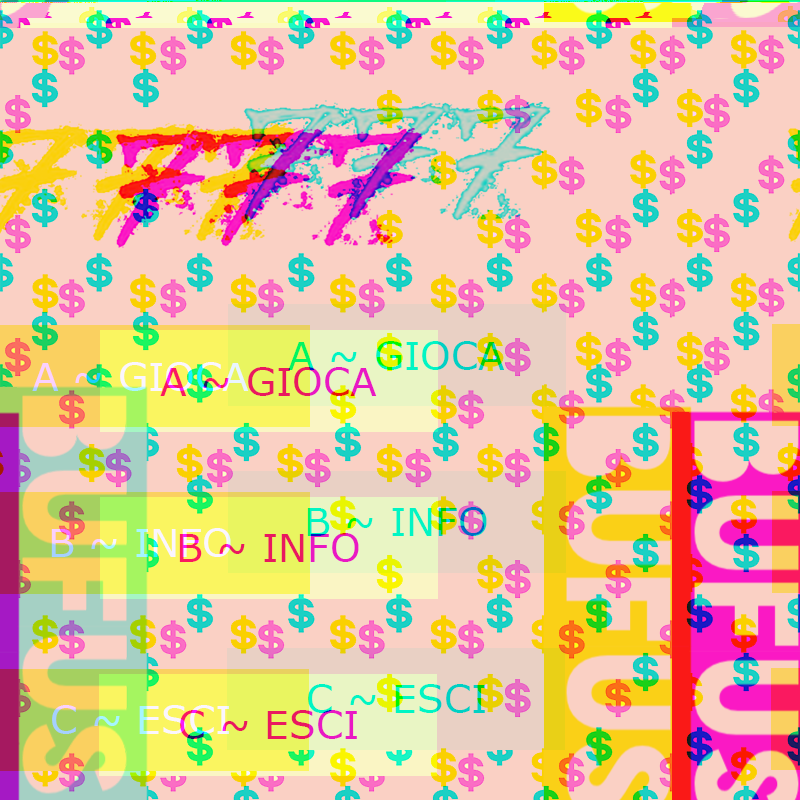
<style>
.page{position:relative;width:800px;height:800px;background:#fad0c4}
.page>*{position:absolute;margin:0}
.t1{font:38.9px "Verdana"}
</style>
<div class="page">
<p class="t1" style="left:288px;top:339px;width:217px;height:29px">A ~ GIOCA</p>
<p class="t1" style="left:307px;top:505px;width:180px;height:29px">B ~ INFO</p>
<p class="t1" style="left:308px;top:682px;width:177px;height:29px">C ~ ESCI</p>
</div>
